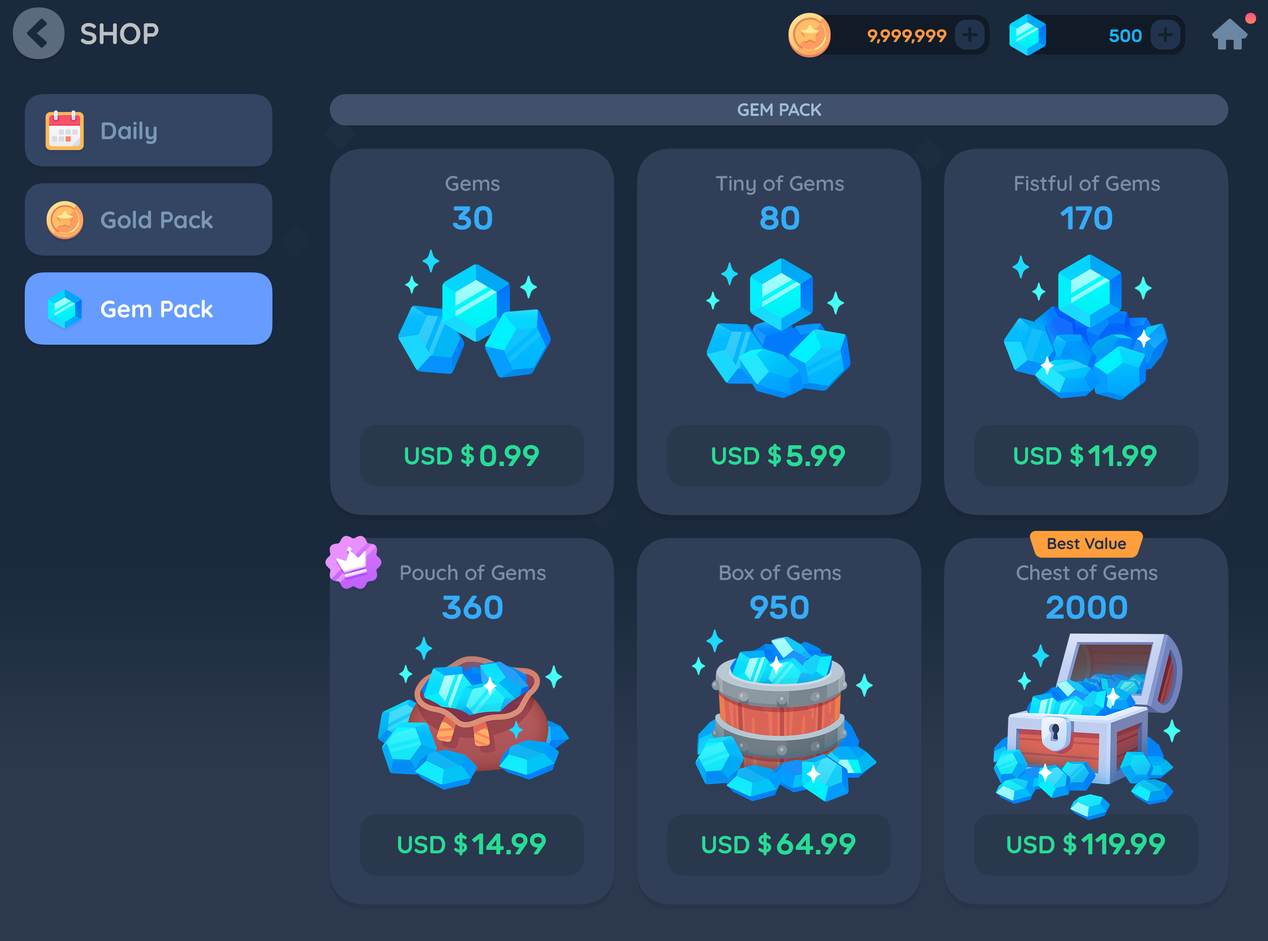
<style>
.page{position:relative;width:1268px;height:941px;background:#303f57}
.page>*{position:absolute;margin:0}
.t1{font:29.7px "Quicksand-Bold";color:#bdc1c4;text-transform:uppercase}
.t2{font:17.8px "Rubik-Medium";letter-spacing:-0.01em;color:#fd9744;text-transform:uppercase}
.t3{font:17.8px "Rubik-Medium";letter-spacing:-0.01em;color:#1cb0f6;text-transform:uppercase}
.t4{font:17.8px "Quicksand-Bold";letter-spacing:-0.01em;color:#a0bdd8;text-transform:uppercase}
.t5{font:23.8px "Quicksand-Bold";color:#7a98b6}
.t6{font:20.8px "Quicksand-SemiBold";color:#7d8da7}
.t7{font:32.7px "Rubik-Medium";color:#34adfc}
.t8{font:23.8px "Quicksand-Bold";color:#ffffff}
.t9{font:24.8px "Quicksand-Bold";color:#27dc95}
.t10{font:29.7px "Rubik-Medium";color:#27dc95}
.t11{font:15.8px "Quicksand-Bold";letter-spacing:-0.01em;color:#203049}
</style>
<div class="page">
<p class="t1" style="left:81px;top:23px;width:77px;height:22px">Shop</p>
<p class="t2" style="left:867px;top:29px;width:79px;height:15px">9,999,999</p>
<p class="t3" style="left:1109px;top:29px;width:32px;height:13px">500</p>
<p class="t4" style="left:737px;top:103px;width:84px;height:13px">Gem Pack</p>
<p class="t5" style="left:102px;top:121px;width:54px;height:23px">Daily</p>
<p class="t6" style="left:445px;top:176px;width:55px;height:15px">Gems</p>
<p class="t6" style="left:715px;top:175px;width:129px;height:20px">Tiny of Gems</p>
<p class="t6" style="left:1015px;top:175px;width:145px;height:16px">Fistful of Gems</p>
<p class="t7" style="left:453px;top:206px;width:39px;height:24px">30</p>
<p class="t7" style="left:760px;top:206px;width:39px;height:24px">80</p>
<p class="t7" style="left:1060px;top:206px;width:52px;height:24px">170</p>
<p class="t5" style="left:101px;top:210px;width:112px;height:19px">Gold Pack</p>
<p class="t8" style="left:101px;top:300px;width:112px;height:18px">Gem Pack</p>
<p class="t9" style="left:405px;top:444px;width:69px;height:23px">USD $</p>
<p class="t10" style="left:480px;top:445px;width:59px;height:21px">0.99</p>
<p class="t9" style="left:712px;top:444px;width:69px;height:23px">USD $</p>
<p class="t10" style="left:786px;top:445px;width:59px;height:21px">5.99</p>
<p class="t9" style="left:1014px;top:444px;width:69px;height:23px">USD $</p>
<p class="t10" style="left:1088px;top:445px;width:68px;height:21px">11.99</p>
<p class="t11" style="left:1047px;top:537px;width:79px;height:12px">Best Value</p>
<p class="t6" style="left:401px;top:564px;width:145px;height:16px">Pouch of Gems</p>
<p class="t6" style="left:719px;top:564px;width:122px;height:16px">Box of Gems</p>
<p class="t6" style="left:1016px;top:564px;width:141px;height:16px">Chest of Gems</p>
<p class="t7" style="left:442px;top:595px;width:61px;height:24px">360</p>
<p class="t7" style="left:750px;top:595px;width:59px;height:24px">950</p>
<p class="t7" style="left:1046px;top:595px;width:81px;height:24px">2000</p>
<p class="t9" style="left:398px;top:832px;width:69px;height:24px">USD $</p>
<p class="t10" style="left:472px;top:833px;width:74px;height:21px">14.99</p>
<p class="t9" style="left:702px;top:832px;width:69px;height:24px">USD $</p>
<p class="t10" style="left:776px;top:833px;width:79px;height:22px">64.99</p>
<p class="t9" style="left:1007px;top:832px;width:69px;height:24px">USD $</p>
<p class="t10" style="left:1081px;top:833px;width:84px;height:21px">119.99</p>
</div>
